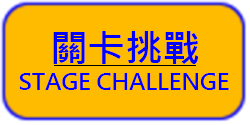
<style>
.page{position:relative;width:250px;height:125px;background:#ffbb00}
.page>*{position:absolute;margin:0}
.t1{font:37.5px "MicrosoftJhengHeiBold";color:#0000ff}
.t2{font:22.5px "MicrosoftJhengHeiBold";color:#0000ff}
</style>
<div class="page">
<p class="t1" style="left:53px;top:31px;width:146px;height:33px">關卡挑戰</p>
<p class="t2" style="left:19px;top:73px;width:210px;height:17px">STAGE CHALLENGE</p>
</div>
